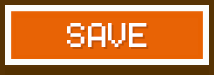
<style>
.page{position:relative;width:214px;height:75px;background:#e86305}
.page>*{position:absolute;margin:0}
.t1{font:55px "Savior4";color:#ffffff}
</style>
<div class="page">
<p class="t1" style="left:67px;top:23px;width:80px;height:24px">SAVE</p>
</div>
